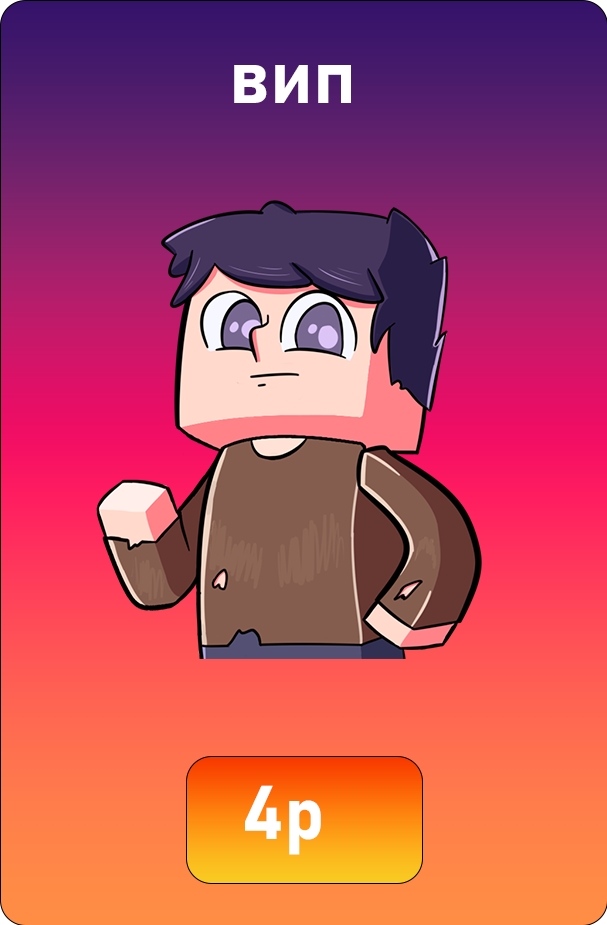
<style>
.page{position:relative;width:607px;height:925px}
.page>*{position:absolute;margin:0}
.t1{font:75px "Bahnschrift-Bold";color:#ffffff}
</style>
<div class="page">
<p class="t1" style="left:234px;top:65px;width:117px;height:38px">вип</p>
<p class="t1" style="left:245px;top:785px;width:76px;height:70px">4р</p>
</div>
